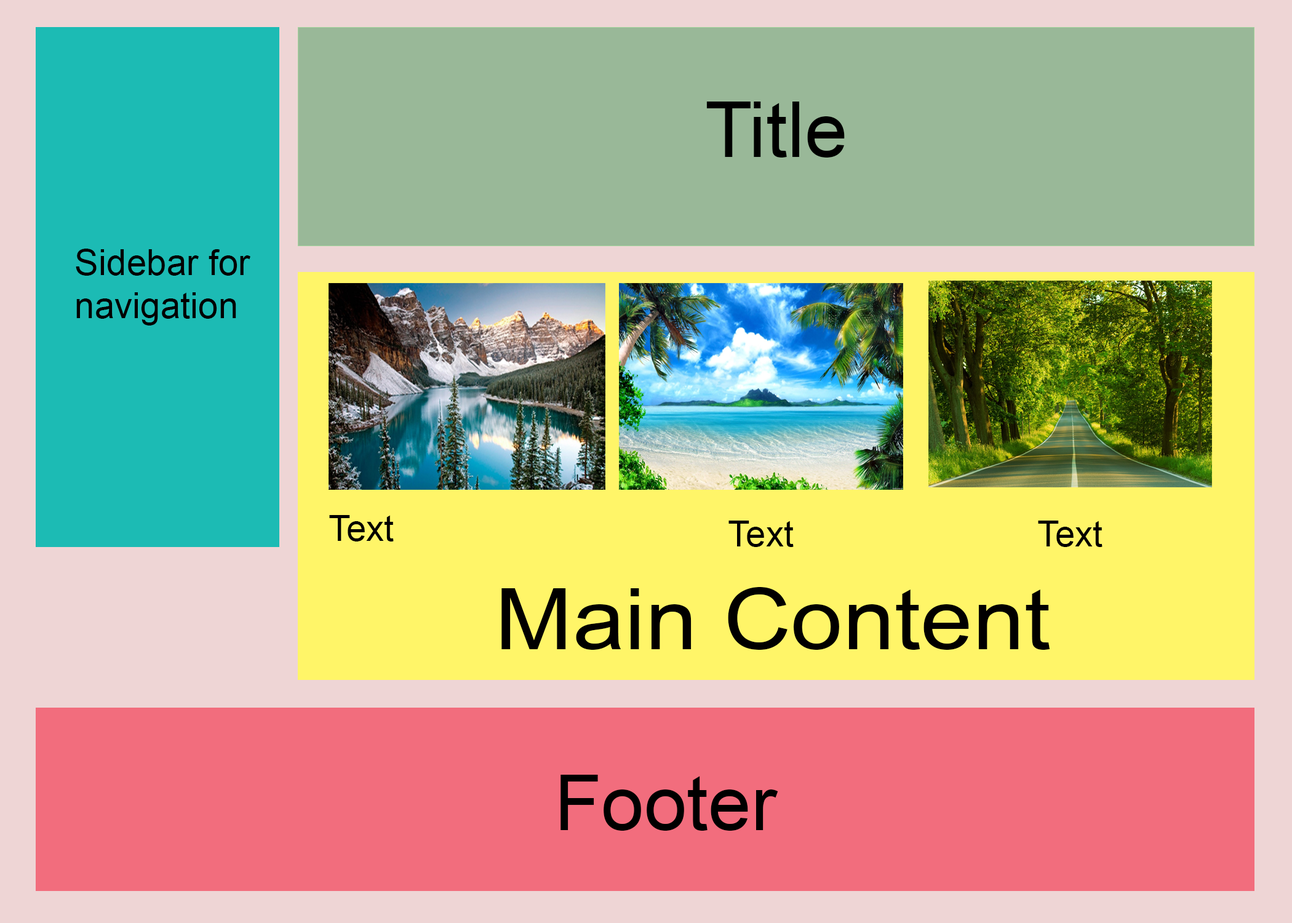
<style>
.page{position:relative;width:1292px;height:923px;background:#eed5d5}
.page>*{position:absolute;margin:0}
.t1{font:76.9px "ArialMT";color:#000000}
.t2{font:35.9px "ArialMT";color:#030000}
.t3{font:84.8px "ArialMT";color:#010000;scale:1.1 1}
</style>
<div class="page">
<p class="t1" style="left:706px;top:102px;width:139px;height:56px">Title</p>
<p class="t2" style="left:76px;top:249px;width:174px;height:76px">Sidebar for <br>navigation</p>
<p class="t2" style="left:329px;top:515px;width:65px;height:26px">Text</p>
<p class="t2" style="left:728px;top:521px;width:66px;height:26px">Text</p>
<p class="t2" style="left:1038px;top:521px;width:65px;height:26px">Text</p>
<p class="t3" style="left:501px;top:587px;width:549px;height:63px">Main Content</p>
<p class="t1" style="left:561px;top:775px;width:217px;height:56px">Footer</p>
</div>
